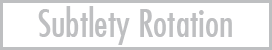
<style>
.page{position:relative;width:272px;height:50px;background:#ffffff}
.page>*{position:absolute;margin:0}
.t1{font:37.3px "FuturaCondensed";color:#bebfc1}
</style>
<div class="page">
<p class="t1" style="left:38px;top:6px;width:194px;height:39px">Subtlety Rotation</p>
</div>
